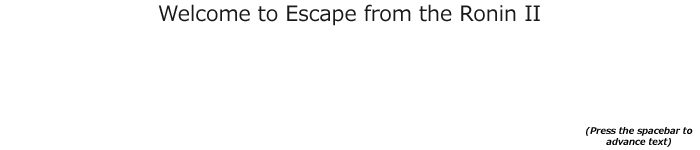
<style>
.page{position:relative;width:700px;height:150px;background:#ffffff}
.page>*{position:absolute;margin:0}
.t1{font:21px "Meiryo";color:#191919}
.t2{font:9px "Meiryo-BoldItalic";color:#000000}
</style>
<div class="page">
<p class="t1" style="left:158px;top:4px;width:382px;height:22px">Welcome to Escape from the Ronin II</p>
<p class="t2" style="left:586px;top:127px;width:107px;height:20px;text-align:center">(Press the spacebar to      advance text)</p>
</div>
